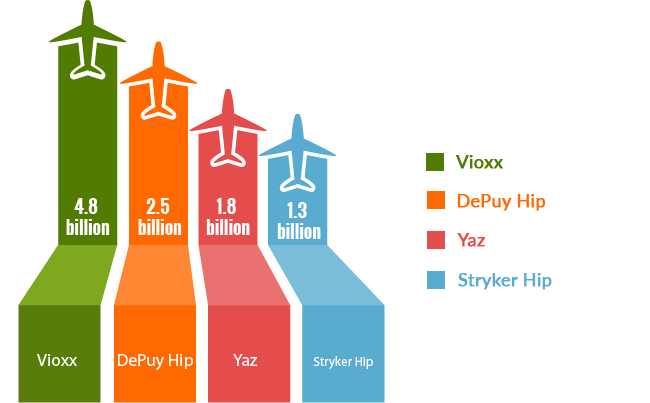
<style>
.page{position:relative;width:650px;height:403px;background:#ffffff}
.page>*{position:absolute;margin:0}
.t1{font:18px "Lato-Medium";color:#527c01;font-weight:bold}
.t2{font:18px "Lato-Medium";color:#ff6900;font-weight:bold}
.t3{font:18px "Lato-Medium";color:#e54d4c;font-weight:bold}
.t4{font:18px "Lato-Medium";color:#59accf;font-weight:bold}
</style>
<div class="page">
<p class="t1" style="left:456px;top:155px;width:47px;height:14px">Vioxx</p>
<p class="t2" style="left:457px;top:194px;width:89px;height:17px">DePuy Hip</p>
<p class="t3" style="left:457px;top:233px;width:28px;height:14px">Yaz</p>
<p class="t4" style="left:458px;top:273px;width:94px;height:17px">Stryker Hip</p>
</div>
